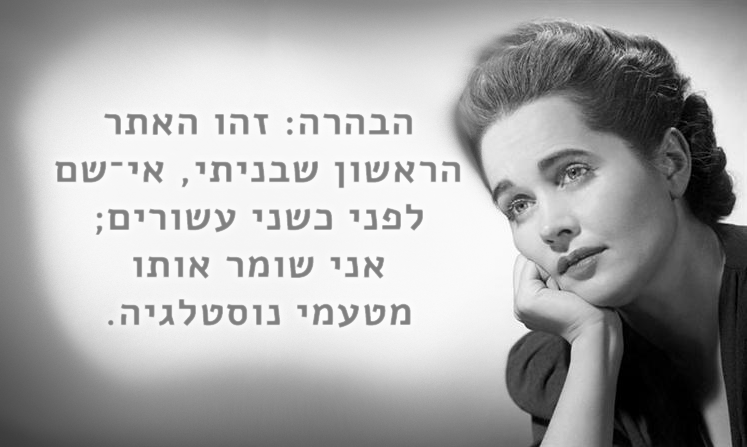
<style>
.page{position:relative;width:747px;height:447px}
.page>*{position:absolute;margin:0}
.t1{font:39.7px "Alef-Bold";color:#808080;font-weight:bold}
</style>
<div class="page">
<p class="t1" style="left:54px;top:113px;width:407px;height:215px;text-align:center">רתאה והז :הרהבה<br>םש־יא ,יתינבש ןושארה ;םירושע ינשכ ינפל<br>ותוא רמוש ינא<br>.היגלטסונ ימעטמ</p>
</div>
